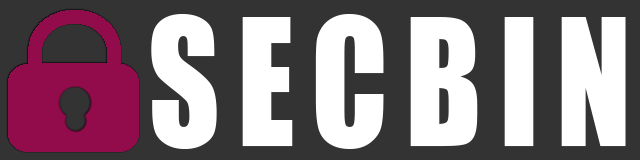
<style>
.page{position:relative;width:640px;height:160px;background:#333333}
.page>*{position:absolute;margin:0}
.t1{font:163.2px "Impact";letter-spacing:0.12em;color:#ffffff;scale:0.85 1}
</style>
<div class="page">
<p class="t1" style="left:151px;top:14px;width:475px;height:135px">SECBIN</p>
</div>
